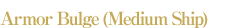
<style>
.page{position:relative;width:225px;height:28px;background:#ffffff}
.page>*{position:absolute;margin:0}
.t1{font:18px "RyuminPro-ExBold";letter-spacing:-0.08em;color:#c4a956}
</style>
<div class="page">
<p class="t1" style="left:0px;top:11px;width:208px;height:17px">Armor Bulge (Medium Ship)</p>
</div>
